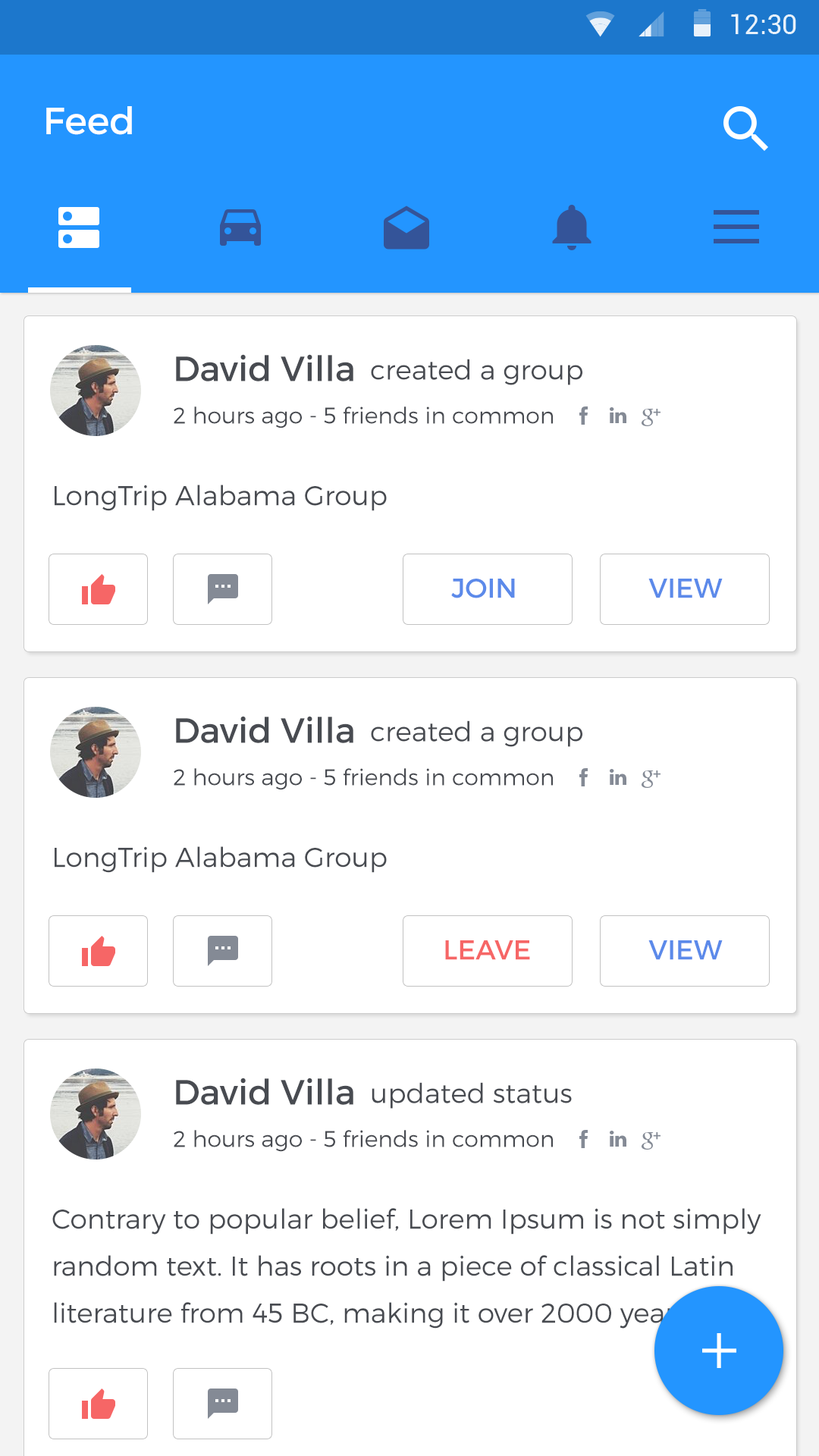
<style>
.page{position:relative;width:819px;height:1456px;background:#ffffff}
.page>*{position:absolute;margin:0}
.t1{font:37.9px "Montserrat-Regular";color:#ffffff}
.t2{font:34.9px "Montserrat-Regular";color:#484b51}
.t3{font:27.3px "Montserrat-Light";color:#484b51}
.t4{font:22.7px "Montserrat-Light";color:#484b51}
.t5{font:27.3px "Montserrat-Regular";color:#5c8aea}
.t6{font:27.3px "Montserrat-Regular";color:#f66666}
.t7{font:27.3px/47px "Montserrat-Light";color:#484b51}
</style>
<div class="page">
<p class="t1" style="left:46px;top:106px;width:86px;height:29px">Feed</p>
<p class="t2" style="left:176px;top:354px;width:177px;height:27px">David Villa</p>
<p class="t3" style="left:371px;top:359px;width:211px;height:26px">created a group</p>
<p class="t4" style="left:174px;top:406px;width:379px;height:22px">2 hours ago - 5 friends in common</p>
<p class="t3" style="left:55px;top:485px;width:332px;height:26px">LongTrip Alabama Group</p>
<p class="t5" style="left:451px;top:579px;width:64px;height:19px">JOIN</p>
<p class="t5" style="left:648px;top:579px;width:75px;height:19px">VIEW</p>
<p class="t2" style="left:176px;top:716px;width:177px;height:27px">David Villa</p>
<p class="t3" style="left:371px;top:720px;width:211px;height:27px">created a group</p>
<p class="t4" style="left:174px;top:768px;width:379px;height:22px">2 hours ago - 5 friends in common</p>
<p class="t3" style="left:55px;top:846px;width:332px;height:27px">LongTrip Alabama Group</p>
<p class="t6" style="left:445px;top:940px;width:85px;height:20px">LEAVE</p>
<p class="t5" style="left:648px;top:940px;width:75px;height:20px">VIEW</p>
<p class="t2" style="left:176px;top:1078px;width:177px;height:27px">David Villa</p>
<p class="t3" style="left:372px;top:1082px;width:200px;height:27px">updated status</p>
<p class="t4" style="left:174px;top:1130px;width:379px;height:22px">2 hours ago - 5 friends in common</p>
<p class="t7" style="left:52px;top:1208px;width:709px;height:121px">Contrary to popular belief, Lorem Ipsum is not simply random text. It has roots in a piece of classical Latin literature from 45 BC, making it over 2000 years old.</p>
</div>
